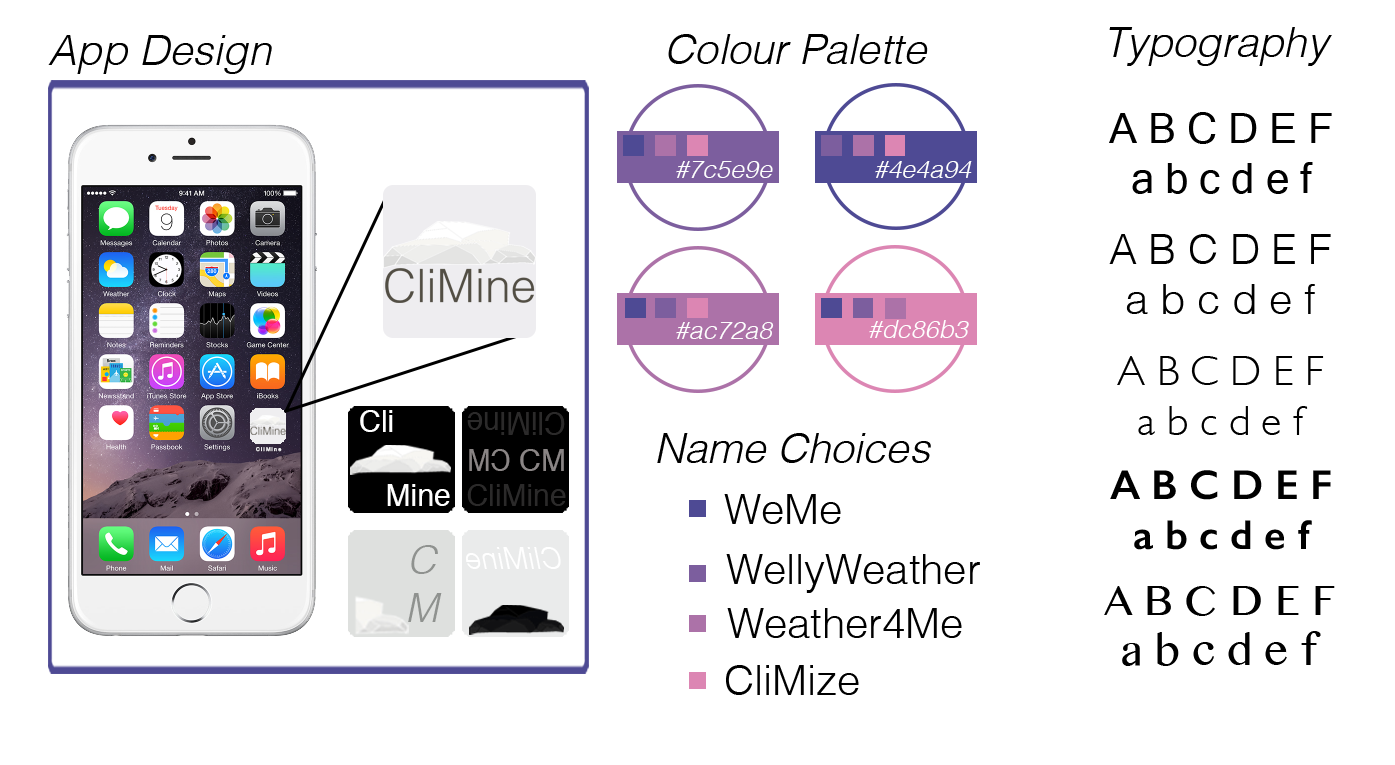
<style>
.page{position:relative;width:1395px;height:765px;background:#ffffff}
.page>*{position:absolute;margin:0}
.t1{font:41.7px "Helvetica-LightOblique";color:#000000}
.t2{font:41.7px/50px "MicrosoftSansSerif";color:#000000}
.t3{font:25px "Helvetica-LightOblique";color:#fefefe}
.t4{font:41.7px/50px "Helvetica-Light";color:#000000}
.t5{font:25px "Helvetica-LightOblique";color:#ffffff}
.t6{font:41.7px/50px "GillSans-Light";color:#000000}
.t7{font:30.1px "Helvetica";color:#ffffff}
.t8{font:31.5px "Helvetica";color:#2b2a2a;scale:0.95 1}
.t9{font:5px "Helvetica";color:#eeedf0}
.t10{font:30.1px "Helvetica";color:#8a8585;scale:0.93 1}
.t11{font:30.1px "Helvetica";color:#8a8585}
.t12{font:41.7px "GillSans-SemiBold";color:#000000}
.t13{font:30.1px "Helvetica";color:#2b2a2a}
.t14{font:41.7px "Helvetica-Light";color:#000000}
.t15{font:40.1px "Helvetica-LightOblique";color:#8f928f}
.t16{font:30.1px "Helvetica-LightOblique";color:#ffffff;scale:0.97 1}
.t17{font:41.7px "LaoMN";color:#000000}
</style>
<div class="page">
<p class="t1" style="left:1109px;top:27px;width:223px;height:39px">Typography</p>
<p class="t1" style="left:48px;top:35px;width:224px;height:39px">App Design</p>
<p class="t1" style="left:668px;top:34px;width:260px;height:30px">Colour Palette</p>
<p class="t2" style="left:1109px;top:112px;width:223px;height:82px;text-align:center">A B C D E F<br>a b c d e f</p>
<p class="t3" style="left:676px;top:161px;width:97px;height:17px">#7c5e9e</p>
<p class="t3" style="left:875px;top:161px;width:97px;height:17px">#4e4a94</p>
<p class="t4" style="left:1109px;top:234px;width:222px;height:80px;text-align:center">A B C D E F<br>a b c d e f</p>
<p class="t3" style="left:676px;top:322px;width:98px;height:17px">#ac72a8</p>
<p class="t5" style="left:869px;top:320px;width:100px;height:18px">#dc86b3</p>
<p class="t6" style="left:1117px;top:356px;width:207px;height:79px;text-align:center">A B C D E F<br>a b c d e f</p>
<p class="t7" style="left:360px;top:410px;width:33px;height:22px">Cli</p>
<p class="t8" style="left:467px;top:412px;width:98px;height:23px;rotate:180deg">CliMine</p>
<p class="t1" style="left:657px;top:433px;width:274px;height:30px">Name Choices</p>
<p class="t9" style="left:256px;top:447px;width:26px;height:5px">C l i M i n e</p>
<p class="t10" style="left:469px;top:449px;width:41px;height:22px;rotate:180deg">CM</p>
<p class="t11" style="left:520px;top:449px;width:44px;height:22px">CM</p>
<p class="t12" style="left:1110px;top:470px;width:221px;height:80px;text-align:center">A B C D E F<br>a b c d e f</p>
<p class="t7" style="left:387px;top:484px;width:63px;height:22px">Mine</p>
<p class="t13" style="left:467px;top:484px;width:99px;height:22px">CliMine</p>
<p class="t14" style="left:724px;top:494px;width:117px;height:30px">WeMe</p>
<p class="t15" style="left:408px;top:545px;width:34px;height:77px;text-align:center">C<br>M</p>
<p class="t16" style="left:466px;top:547px;width:95px;height:22px;rotate:180deg">CliMine</p>
<p class="t14" style="left:726px;top:554px;width:254px;height:39px">WellyWeather</p>
<p class="t17" style="left:1104px;top:586px;width:231px;height:80px;text-align:center">A B C D E F<br>a b c d e f</p>
<p class="t14" style="left:727px;top:608px;width:235px;height:30px">Weather4Me</p>
<p class="t14" style="left:726px;top:665px;width:133px;height:30px">CliMize</p>
</div>
